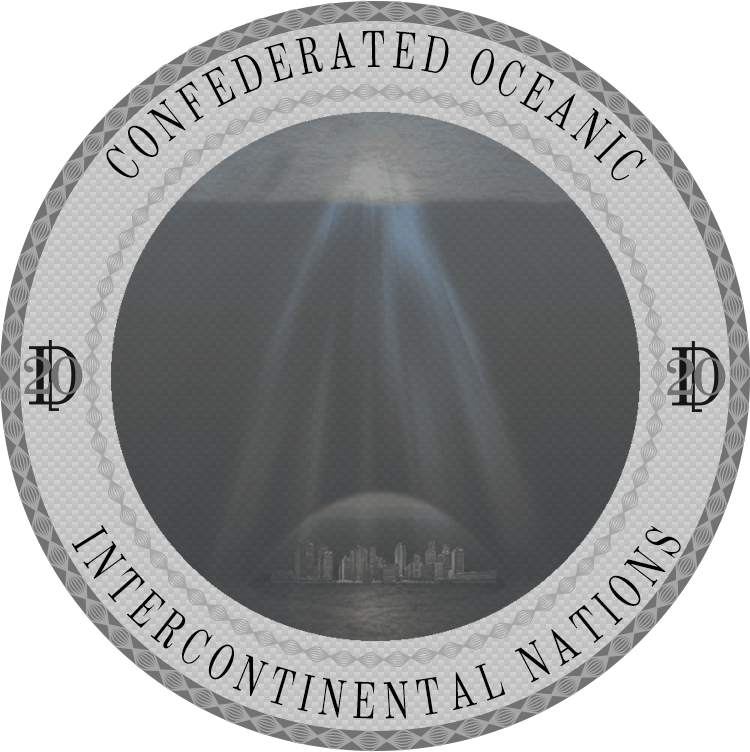
<style>
.page{position:relative;width:750px;height:752px;background:#ffffff}
.page>*{position:absolute;margin:0}
.t1{font:50.9px/33.3px "OldStandardTT-Regular";letter-spacing:0.124em;color:#020202;scale:0.7 1}
.t2{font:50.9px "OldStandardTT-Regular";letter-spacing:0.124em;color:#020202;scale:0.7 1}
</style>
<div class="page">
<p class="t1" style="left:106px;top:30px;width:541px;height:151px">CONFEDERATED OCEANIC</p>
<p class="t2" style="left:71px;top:525px;width:610px;height:194px;rotate:3deg">INTERCONTINENTAL NATIONS</p>
</div>
